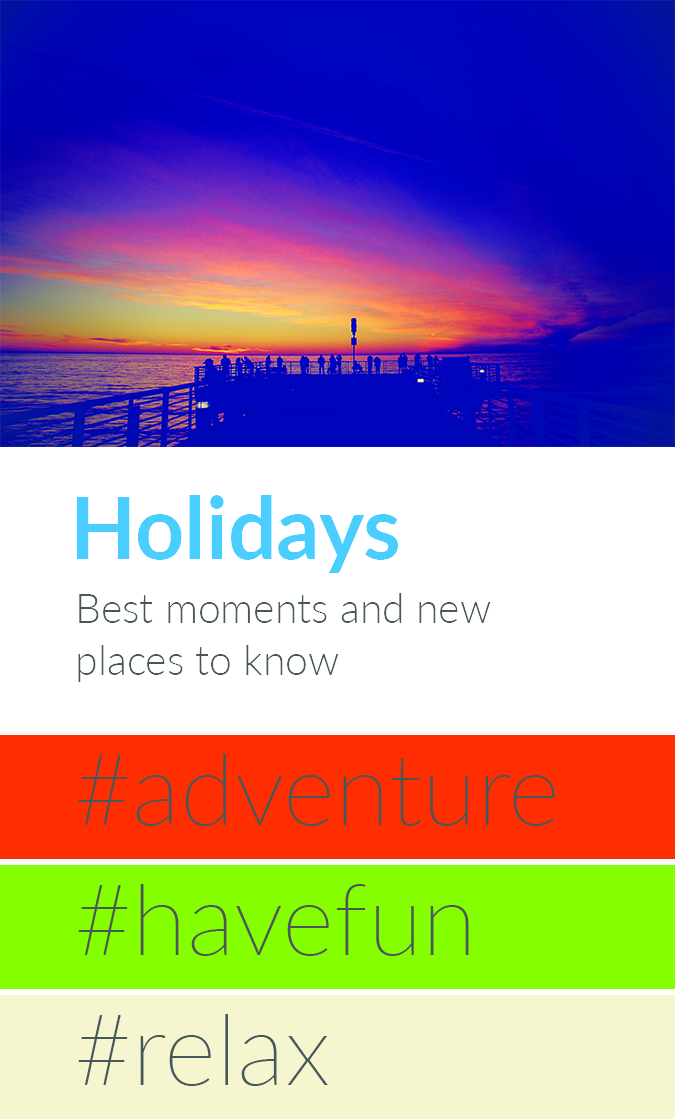
<style>
.page{position:relative;width:675px;height:1119px;background:#ffffff}
.page>*{position:absolute;margin:0}
.t1{font:86px "Lato-Bold";color:#4acdff}
.t2{font:41px/52px "Lato-Light";color:#48585a}
</style>
<div class="page">
<p class="t1" style="left:76px;top:495px;width:322px;height:78px">Holidays</p>
<p class="t2" style="left:78px;top:593px;width:413px;height:89px;text-align:right">Best moments and new places to know</p>
</div>
